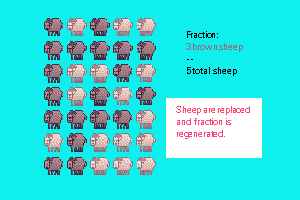
<style>
.page{position:relative;width:300px;height:200px;background:#0ff0ee}
.page>*{position:absolute;margin:0}
.t1{font:9px/12px "Nunito-Regular";letter-spacing:-0.019em;color:#000000}
.t2{font:9px/12px "Nunito-Regular";letter-spacing:-0.019em;color:#936e7b}
.t3{font:9px/12px "Nunito-Regular";letter-spacing:-0.019em;color:#ff4777}
</style>
<div class="page">
<p class="t1" style="left:186px;top:31px;width:57px;height:45px">Fraction:<br><span class="t2">3 brown sheep<br></span>--<br>5 total  sheep</p>
<p class="t3" style="left:176px;top:106px;width:74px;height:33px">Sheep are replaced and  fraction is regenerated.</p>
</div>
